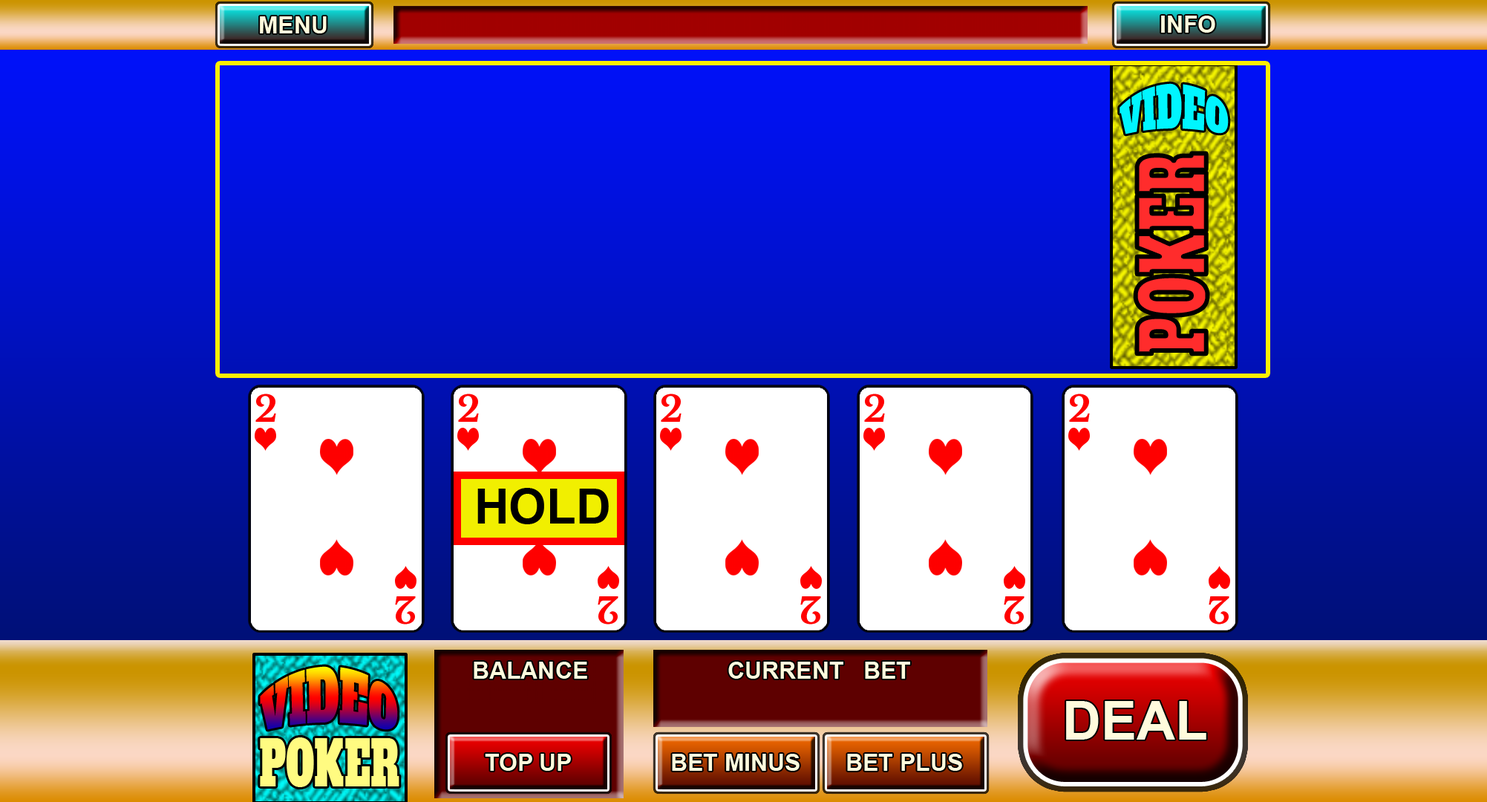
<style>
.page{position:relative;width:1487px;height:802px}
.page>*{position:absolute;margin:0}
.t1{font:23.8px "Arial-BoldMT";color:#ffffff}
.t2{font:35.6px "AlfaSlabOne-Regular";color:#000000;scale:0.86 1}
.t3{font:89.1px "AlfaSlabOne-Regular";color:#000000;scale:0.58 1}
.t4{font:45.2px "AlfaSlabOne-Regular";color:#000000;scale:0.86 1}
.t5{font:53.5px "Arial-BoldMT";color:#ffffff}
.t6{font:61.8px "AlfaSlabOne-Regular";color:#000000;scale:0.58 1}
</style>
<div class="page">
<p class="t1" style="left:260px;top:16px;width:67px;height:17px">MENU</p>
<p class="t1" style="left:1161px;top:16px;width:54px;height:17px">INFO</p>
<p class="t2" style="left:1120px;top:83px;width:109px;height:51px">VIDEO</p>
<p class="t3" style="left:1135px;top:153px;width:73px;height:201px;rotate:-90deg">POKER</p>
<p class="t4" style="left:260px;top:666px;width:138px;height:64px">VIDEO</p>
<p class="t1" style="left:474px;top:662px;width:113px;height:17px">BALANCE</p>
<p class="t1" style="left:728px;top:662px;width:182px;height:17px">CURRENT   BET</p>
<p class="t5" style="left:1066px;top:701px;width:140px;height:38px">DEAL</p>
<p class="t6" style="left:260px;top:737px;width:139px;height:50px">POKER</p>
<p class="t1" style="left:485px;top:754px;width:86px;height:17px">TOP UP</p>
<p class="t1" style="left:672px;top:754px;width:128px;height:17px">BET MINUS</p>
<p class="t1" style="left:847px;top:754px;width:115px;height:17px">BET PLUS</p>
</div>
